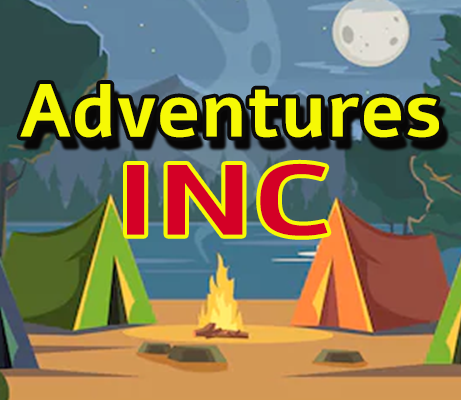
<style>
.page{position:relative;width:461px;height:400px}
.page>*{position:absolute;margin:0}
.t1{font:74.3px "Alef-Bold";color:#f6f905}
.t2{font:99px "Alef-Bold";color:#d40026;scale:1.27 1}
</style>
<div class="page">
<p class="t1" style="left:20px;top:84px;width:419px;height:54px">Adventures</p>
<p class="t2" style="left:127px;top:163px;width:201px;height:73px">INC</p>
</div>
